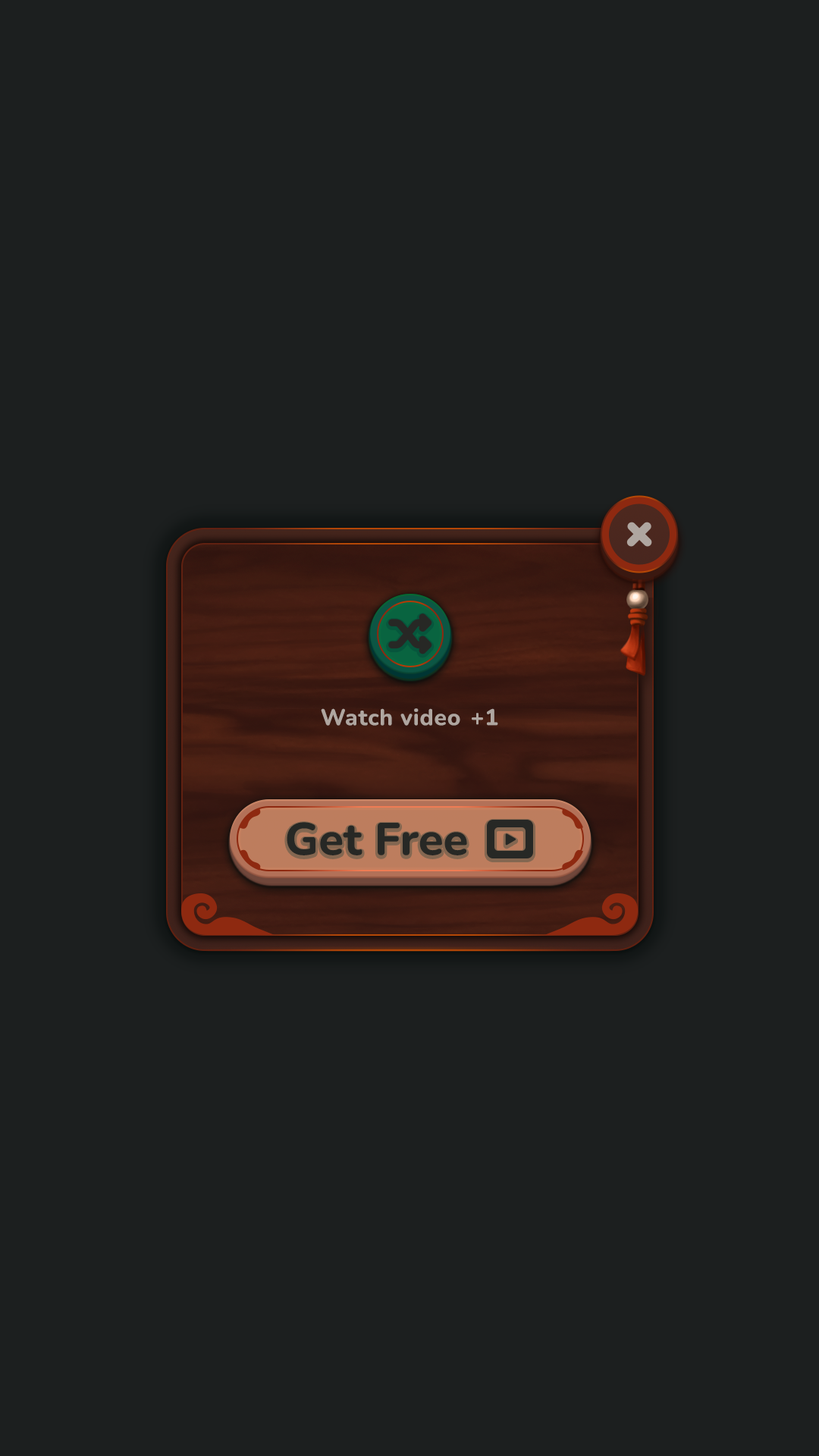
<style>
.page{position:relative;width:819px;height:1456px;background:#1c1f1f}
.page>*{position:absolute;margin:0}
.t1{font:22.7px "Nunito-ExtraBold";letter-spacing:0.025em;color:#afa6a0}
.t2{font:45.5px "Nunito-ExtraBold";color:#272825}
</style>
<div class="page">
<p class="t1" style="left:321px;top:708px;width:139px;height:18px">Watch video</p>
<p class="t1" style="left:472px;top:708px;width:26px;height:18px">+1</p>
<p class="t2" style="left:287px;top:822px;width:180px;height:33px">Get Free</p>
</div>
